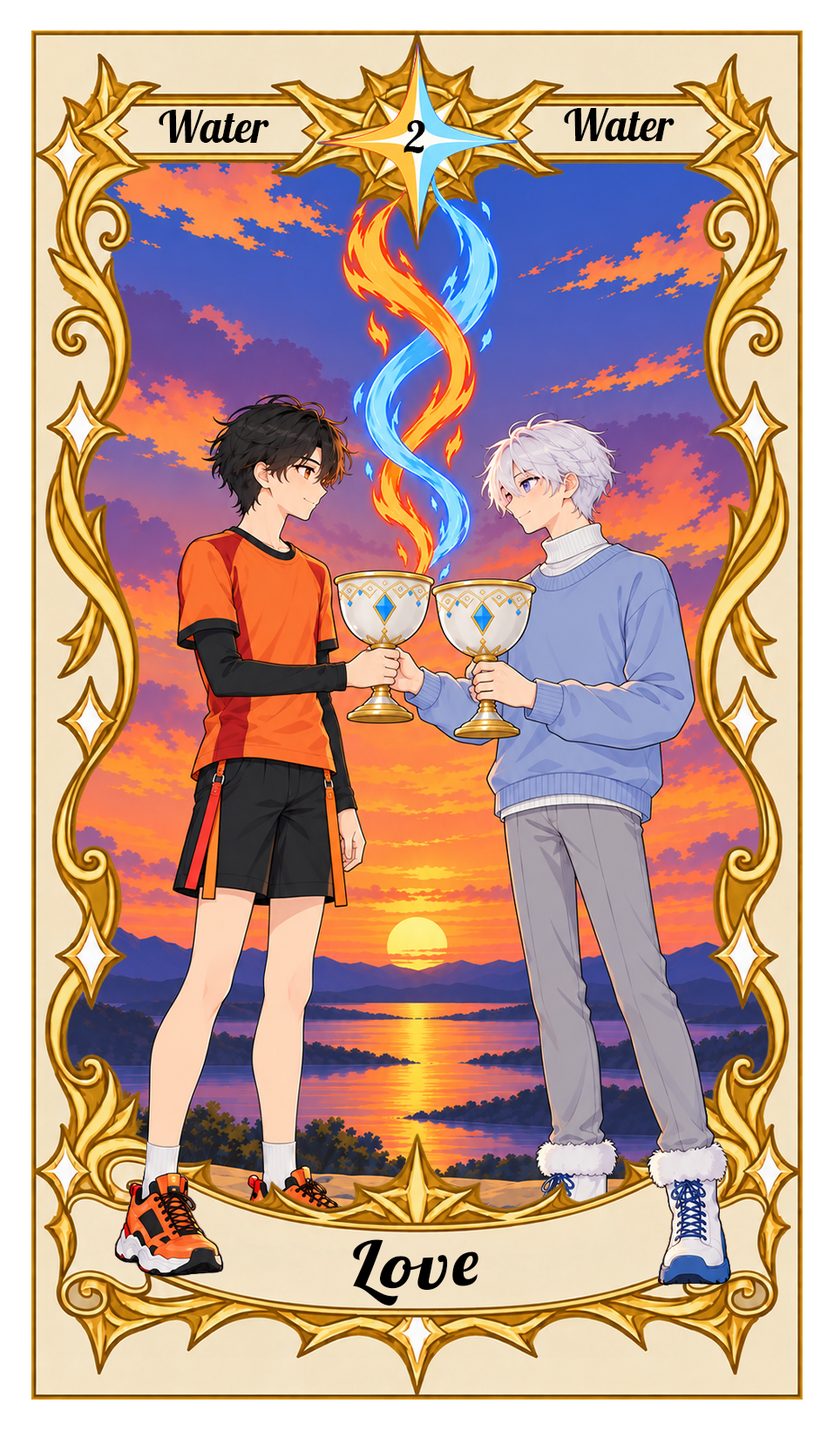
<style>
.page{position:relative;width:834px;height:1430px}
.page>*{position:absolute;margin:0}
.t1{font:43.6px "Lobster-Regular";color:#000000}
.t2{font:65.3px "Lobster-Regular";letter-spacing:0.05em;color:#000000}
</style>
<div class="page">
<p class="t1" style="left:159px;top:110px;width:110px;height:33px">Water</p>
<p class="t1" style="left:564px;top:108px;width:110px;height:33px">Water</p>
<p class="t1" style="left:403px;top:120px;width:22px;height:33px">2</p>
<p class="t2" style="left:353px;top:1240px;width:125px;height:67px">Love</p>
</div>
